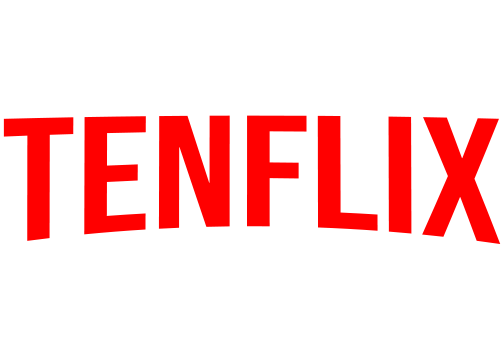
<style>
.page{position:relative;width:504px;height:360px;background:#ffffff}
.page>*{position:absolute;margin:0}
.t1{font:180px "BebasNeue-Regular";color:#ff0000;scale:1.14 1}
</style>
<div class="page">
<p class="t1" style="left:3px;top:115px;width:498px;height:129px">TENFLIX</p>
</div>
